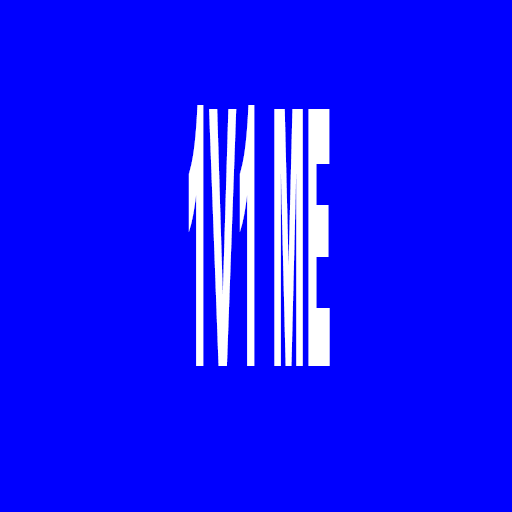
<style>
.page{position:relative;width:512px;height:512px;background:#0000ff}
.page>*{position:absolute;margin:0}
.t1{font:358.9px "Arial-Black";color:#ffffff;scale:0.1 1}
</style>
<div class="page">
<p class="t1" style="left:188px;top:105px;width:142px;height:261px">1V1 ME</p>
</div>
